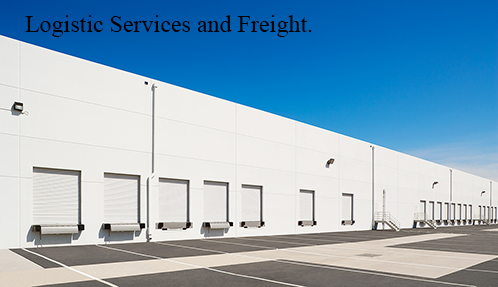
<style>
.page{position:relative;width:498px;height:287px}
.page>*{position:absolute;margin:0}
.t1{font:24px "TimesNewRomanPSMT";color:#000000}
</style>
<div class="page">
<p class="t1" style="left:25px;top:15px;width:287px;height:22px">Logistic Services and Freight.</p>
</div>
